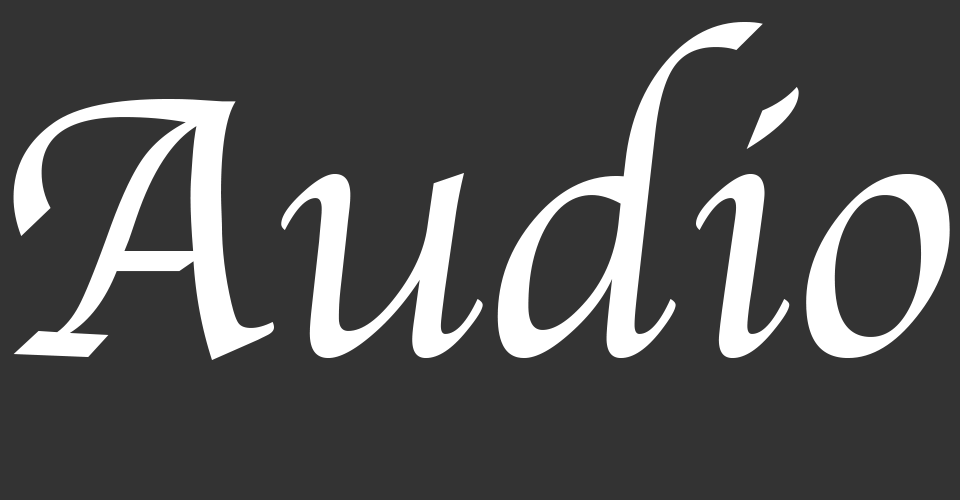
<style>
.page{position:relative;width:960px;height:500px;background:#333333}
.page>*{position:absolute;margin:0}
.t1{font:382.7px "Apple-Chancery";color:#ffffff}
</style>
<div class="page">
<p class="t1" style="left:13px;top:22px;width:937px;height:338px">Audio</p>
</div>
